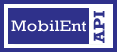
<style>
.page{position:relative;width:117px;height:52px;background:#2f318b}
.page>*{position:absolute;margin:0}
.t1{font:16px "Rockwell-Bold";color:#2f318b;scale:1.13 1}
.t2{font:15.6px "Rockwell";color:#ffffff;scale:1.17 1}
</style>
<div class="page">
<p class="t1" style="left:93px;top:11px;width:12px;height:32px;rotate:-90deg">API</p>
<p class="t2" style="left:11px;top:20px;width:75px;height:12px">MobilEnt</p>
</div>
